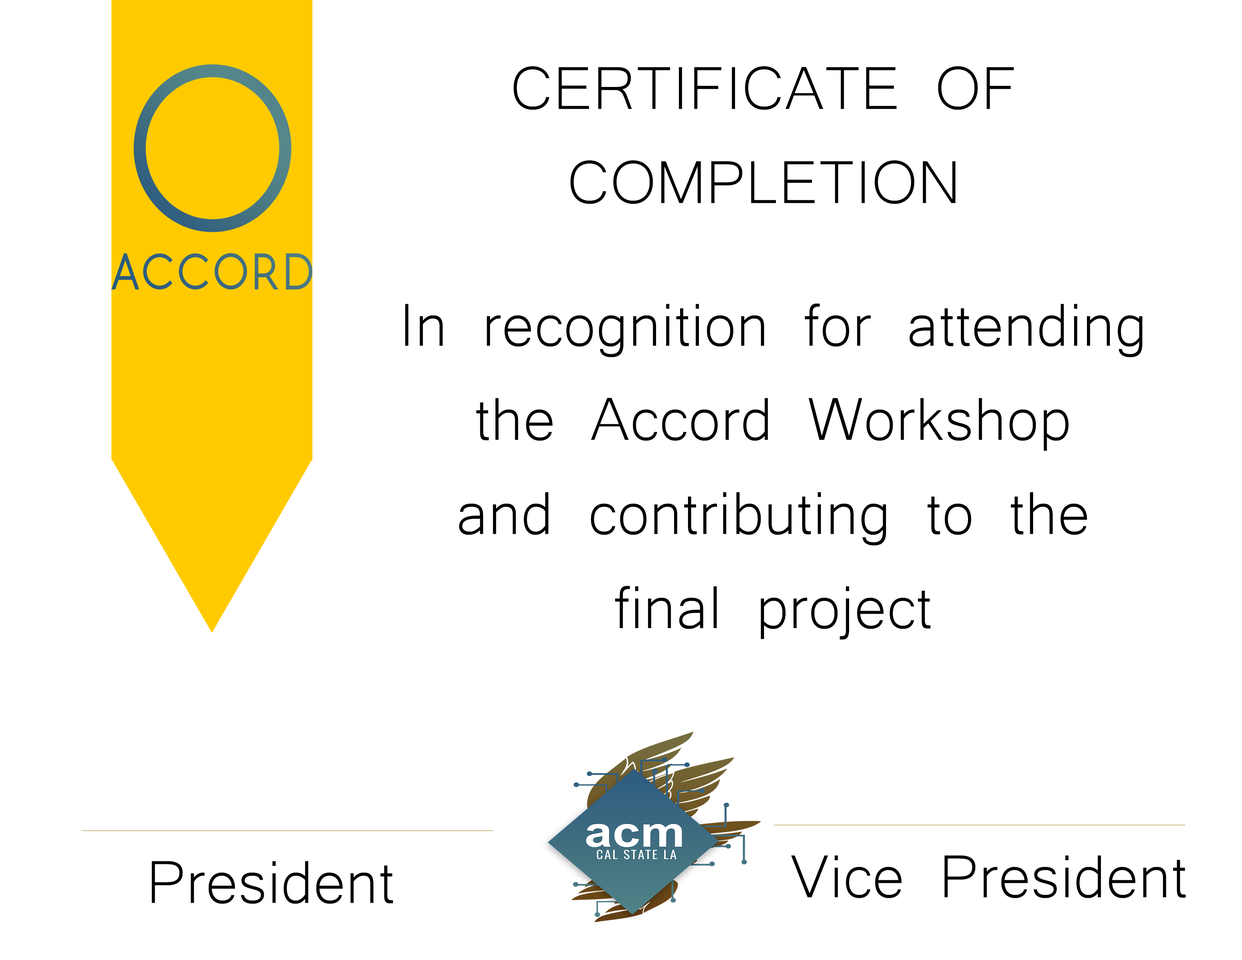
<style>
.page{position:relative;width:1242px;height:960px;background:#ffffff}
.page>*{position:absolute;margin:0}
.t1{font:78.4px "Microsoft-Yi-Baiti";color:#000000}
</style>
<div class="page">
<p class="t1" style="left:513px;top:66px;width:501px;height:138px;text-align:center">CERTIFICATE OF<br>COMPLETION</p>
<p class="t1" style="left:405px;top:303px;width:738px;height:337px;text-align:center">In recognition for attending<br>the Accord Workshop<br>and contributing to the<br>final project</p>
<p class="t1" style="left:791px;top:855px;width:395px;height:43px">Vice President</p>
<p class="t1" style="left:152px;top:861px;width:241px;height:43px">President</p>
</div>
